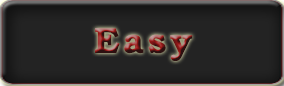
<style>
.page{position:relative;width:284px;height:86px;background:#232323}
.page>*{position:absolute;margin:0}
.t1{font:36px "BookmanOldStyle-Bold";letter-spacing:0.1em}
</style>
<div class="page">
<p class="t1" style="left:95px;top:28px;width:98px;height:33px">Easy</p>
</div>
